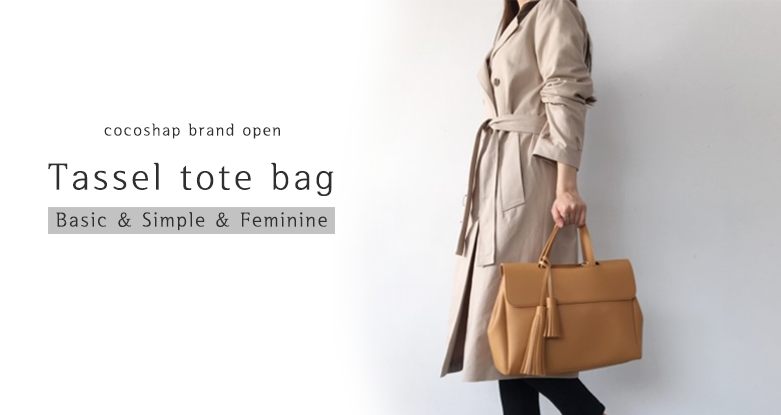
<style>
.page{position:relative;width:781px;height:415px;background:#ffffff}
.page>*{position:absolute;margin:0}
.t1{font:16.9px "SeH-CL";letter-spacing:0.085em;color:#2f2f2f}
.t2{font:38.1px "SeH-CL";letter-spacing:0.085em;color:#2f2f2f}
.t3{font:20.5px "SeH-CL";letter-spacing:0.085em;color:#2f2f2f}
</style>
<div class="page">
<p class="t1" style="left:104px;top:123px;width:176px;height:16px">cocoshap brand open</p>
<p class="t2" style="left:48px;top:162px;width:286px;height:34px">Tassel tote bag</p>
<p class="t3" style="left:56px;top:212px;width:271px;height:19px">Basic &amp; Simple &amp; Feminine</p>
</div>
